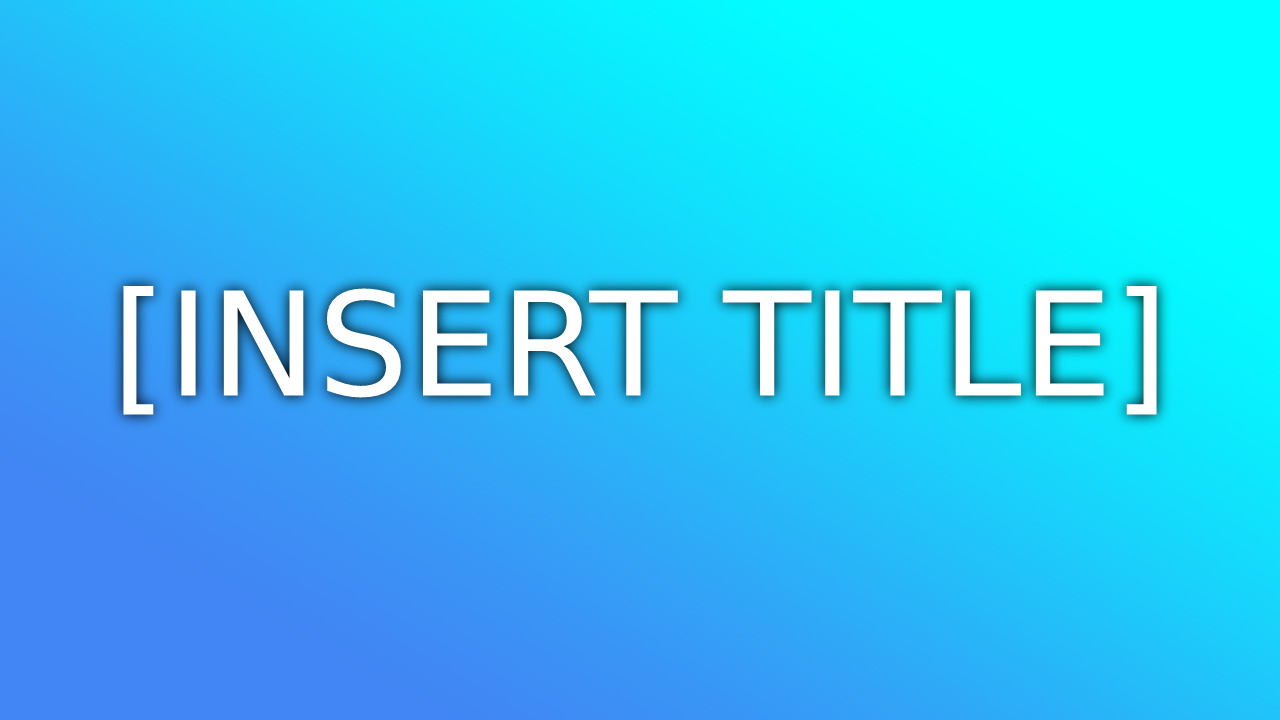
<style>
.page{position:relative;width:1280px;height:720px}
.page>*{position:absolute;margin:0}
.t1{font:144px "DejaVuSans";color:#ffffff}
</style>
<div class="page">
<p class="t1" style="left:123px;top:285px;width:1034px;height:130px">[INSERT TITLE]</p>
</div>
